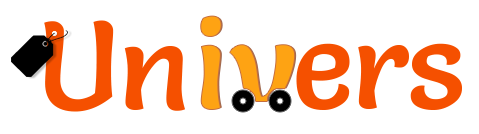
<style>
.page{position:relative;width:479px;height:134px;background:#ffffff}
.page>*{position:absolute;margin:0}
.t1{font:125px "Salsa-Regular";letter-spacing:0.02em;color:#fea313}
.t2{font:125px "Salsa-Regular";letter-spacing:-0.02em;color:#f55000}
</style>
<div class="page">
<p class="t1" style="left:201px;top:16px;width:94px;height:94px">iv</p>
<p class="t2" style="left:44px;top:20px;width:141px;height:92px">Un</p>
<p class="t2" style="left:296px;top:43px;width:166px;height:67px">ers</p>
</div>
